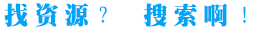
<style>
.page{position:relative;width:255px;height:30px;background:#ffffff}
.page>*{position:absolute;margin:0}
.t1{font:24px "¾­µäÌØËÎ¼ò Regular";letter-spacing:0.25em;color:#00a5f6}
</style>
<div class="page">
<p class="t1" style="left:4px;top:3px;width:242px;height:24px">找资源？ 搜索啊！</p>
</div>
